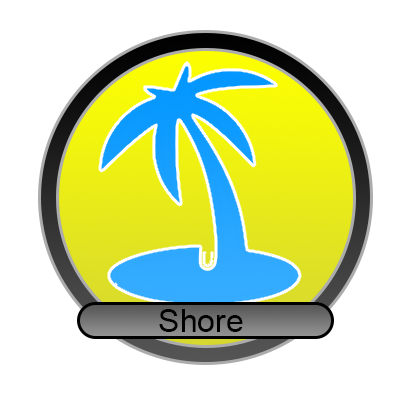
<style>
.page{position:relative;width:400px;height:400px;background:#ffffff}
.page>*{position:absolute;margin:0}
.t1{font:32px "ArialMT";color:#000000}
</style>
<div class="page">
<p class="t1" style="left:159px;top:309px;width:84px;height:23px">Shore</p>
</div>
